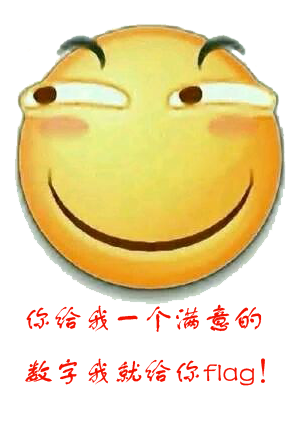
<style>
.page{position:relative;width:300px;height:425px;background:#ffffff}
.page>*{position:absolute;margin:0}
.t1{font:30px "FZSTK--GBK1-0";color:#f31201}
</style>
<div class="page">
<p class="t1" style="left:25px;top:304px;width:240px;height:82px">你给我一个满意的<br>数字我就给你flag！</p>
</div>
